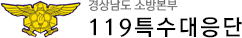
<style>
.page{position:relative;width:242px;height:38px;background:#ffffff}
.page>*{position:absolute;margin:0}
.t1{font:22px "RixGoB";letter-spacing:0.1em;color:#000000}
</style>
<div class="page">
<p class="t1" style="left:90px;top:17px;width:152px;height:21px">119특수대응단</p>
</div>
